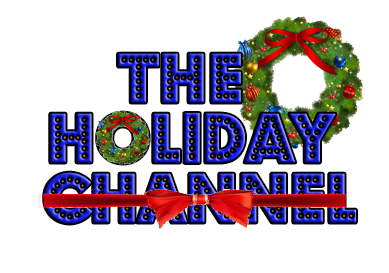
<style>
.page{position:relative;width:389px;height:273px;background:#ffffff}
.page>*{position:absolute;margin:0}
.t1{font:60px/60px "BudmoJiggler"}
</style>
<div class="page">
<p class="t1" style="left:44px;top:53px;width:312px;height:171px;text-align:center">The <br>Holiday<br> Channel</p>
</div>
